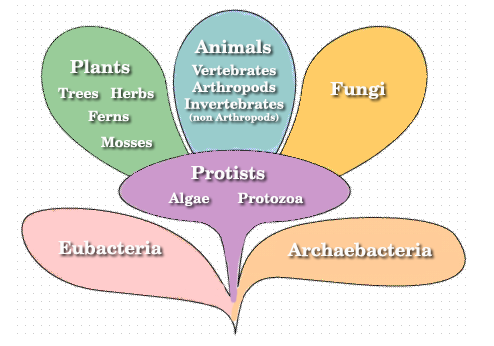
<style>
.page{position:relative;width:494px;height:346px;background:#ffffff}
.page>*{position:absolute;margin:0}
.t1{font:18px "NewCenturySchlbk-Bold";color:#fbfbfb}
.t2{font:14px "NewCenturySchlbk-Bold";color:#fbfbfb}
.t3{font:10px "NewCenturySchlbk-Bold";color:#fbfbfb}
</style>
<div class="page">
<p class="t1" style="left:194px;top:39px;width:77px;height:15px">Animals</p>
<p class="t1" style="left:70px;top:59px;width:60px;height:15px">Plants</p>
<p class="t2" style="left:184px;top:64px;width:100px;height:59px;text-align:center">Vertebrates<br>Arthropods<br>Invertebrates<br><span class="t3">(non Arthropods)</span></p>
<p class="t2" style="left:58px;top:87px;width:96px;height:12px">Trees   Herbs</p>
<p class="t1" style="left:330px;top:81px;width:56px;height:18px">Fungi</p>
<p class="t2" style="left:88px;top:110px;width:41px;height:12px">Ferns</p>
<p class="t2" style="left:101px;top:136px;width:51px;height:12px">Mosses</p>
<p class="t1" style="left:191px;top:165px;width:74px;height:15px">Protists</p>
<p class="t2" style="left:168px;top:192px;width:136px;height:14px">Algae       Protozoa</p>
<p class="t1" style="left:58px;top:240px;width:104px;height:15px">Eubacteria</p>
<p class="t1" style="left:287px;top:242px;width:146px;height:15px">Archaebacteria</p>
</div>
